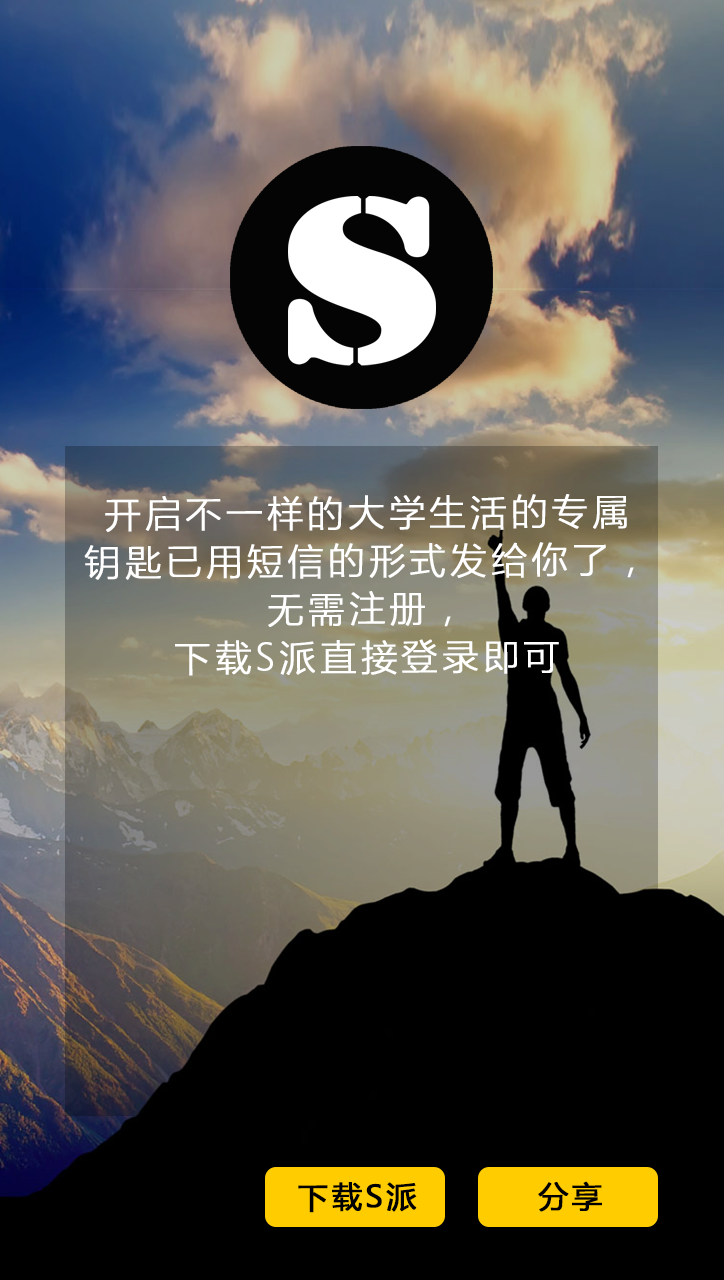
<style>
.page{position:relative;width:724px;height:1280px;background:#000000}
.page>*{position:absolute;margin:0}
.t1{font:36.2px/48.1px "MicrosoftYaHeiLight";letter-spacing:0.1em;color:#ffffff;font-weight:bold}
.t2{font:30px "MicrosoftYaHei";letter-spacing:0.1em;color:#000000;font-weight:bold}
</style>
<div class="page">
<p class="t1" style="left:84px;top:494px;width:550px;height:182px;text-align:center">开启不一样的大学生活的专属<br>钥匙已用短信的形式发给你了，<br>无需注册，<br>下载S派直接登录即可</p>
<p class="t2" style="left:298px;top:1182px;width:119px;height:31px">下载S派</p>
<p class="t2" style="left:538px;top:1181px;width:64px;height:31px">分享</p>
</div>
